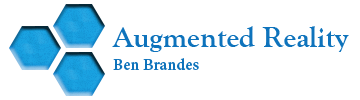
<style>
.page{position:relative;width:360px;height:100px;background:#ffffff}
.page>*{position:absolute;margin:0}
.t1{font:30px "GoudyOldStyleT-Bold";color:#0e73bc}
.t2{font:18px "AdobeGurmukhi-Bold";color:#0e73bc}
</style>
<div class="page">
<p class="t1" style="left:112px;top:26px;width:237px;height:26px">Augmented Reality</p>
<p class="t2" style="left:113px;top:58px;width:86px;height:12px">Ben Brandes</p>
</div>
